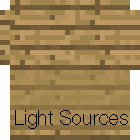
<style>
.page{position:relative;width:140px;height:140px;background:#9f844d}
.page>*{position:absolute;margin:0}
.t1{font:20px "HelveticaNeue-Thin";color:#000000}
</style>
<div class="page">
<p class="t1" style="left:15px;top:110px;width:113px;height:19px">Light Sources</p>
</div>
